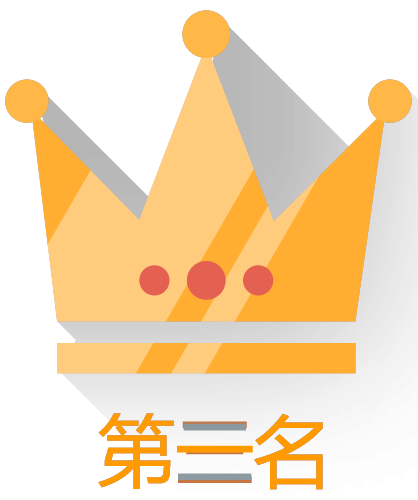
<style>
.page{position:relative;width:418px;height:500px;background:#ffffff}
.page>*{position:absolute;margin:0}
.t1{font:77.7px "MicrosoftYaHei";color:#ff9b00}
</style>
<div class="page">
<p class="t1" style="left:98px;top:413px;width:225px;height:77px">第三名</p>
<p class="t1" style="left:98px;top:413px;width:225px;height:77px">第二名</p>
<p class="t1" style="left:98px;top:413px;width:225px;height:77px">第一名</p>
</div>
